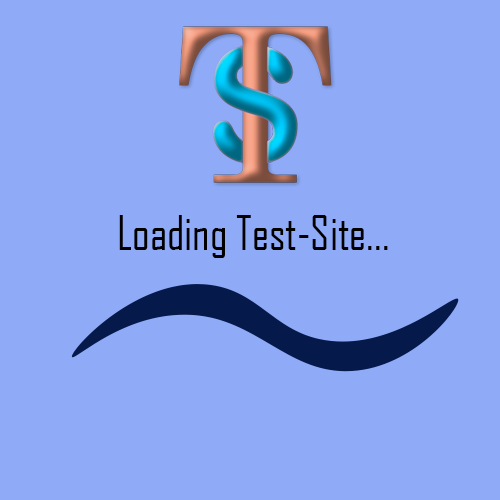
<style>
.page{position:relative;width:500px;height:500px;background:#8fabf8}
.page>*{position:absolute;margin:0}
.t1{font:45.8px "AgencyFB-Reg";color:#000000}
</style>
<div class="page">
<p class="t1" style="left:119px;top:215px;width:269px;height:43px">Loading Test-Site...</p>
</div>
